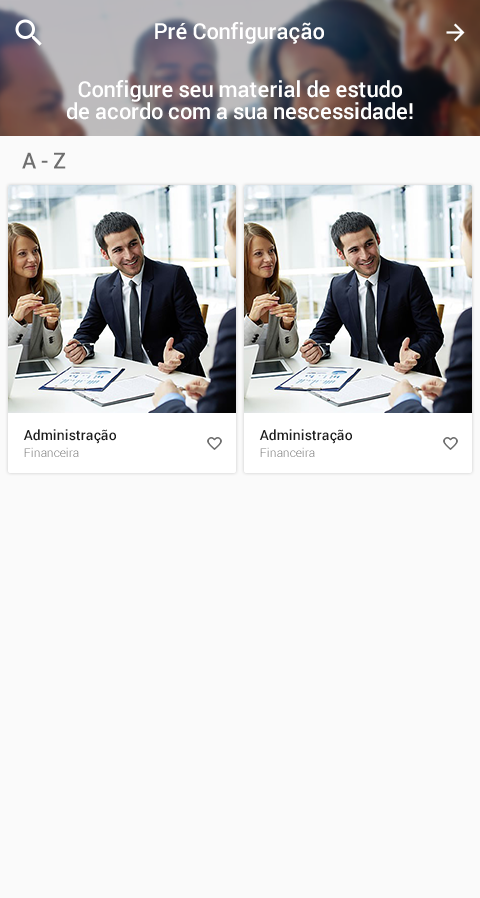
<style>
.page{position:relative;width:480px;height:898px;background:#fafafa}
.page>*{position:absolute;margin:0}
.t1{font:22px "Roboto-Medium";color:#ffffff}
.t2{font:22px/22px "Roboto-Medium";color:#ffffff}
.t3{font:22px "Roboto-Medium";color:#6e6e6e}
.t4{font:14px "Roboto-Medium";color:#1e1e1e}
.t5{font:12px "Roboto-Light"}
</style>
<div class="page">
<p class="t1" style="left:155px;top:22px;width:169px;height:22px">Pré Configuração</p>
<p class="t2" style="left:67px;top:80px;width:346px;height:40px;text-align:center">Configure seu material de estudo<br>de acordo com a sua nescessidade!</p>
<p class="t3" style="left:22px;top:152px;width:44px;height:17px">A - Z</p>
<p class="t4" style="left:23px;top:429px;width:93px;height:15px">Administração</p>
<p class="t4" style="left:259px;top:429px;width:93px;height:15px">Administração</p>
<p class="t5" style="left:24px;top:447px;width:55px;height:10px">Financeira</p>
<p class="t5" style="left:260px;top:447px;width:55px;height:10px">Financeira</p>
</div>
